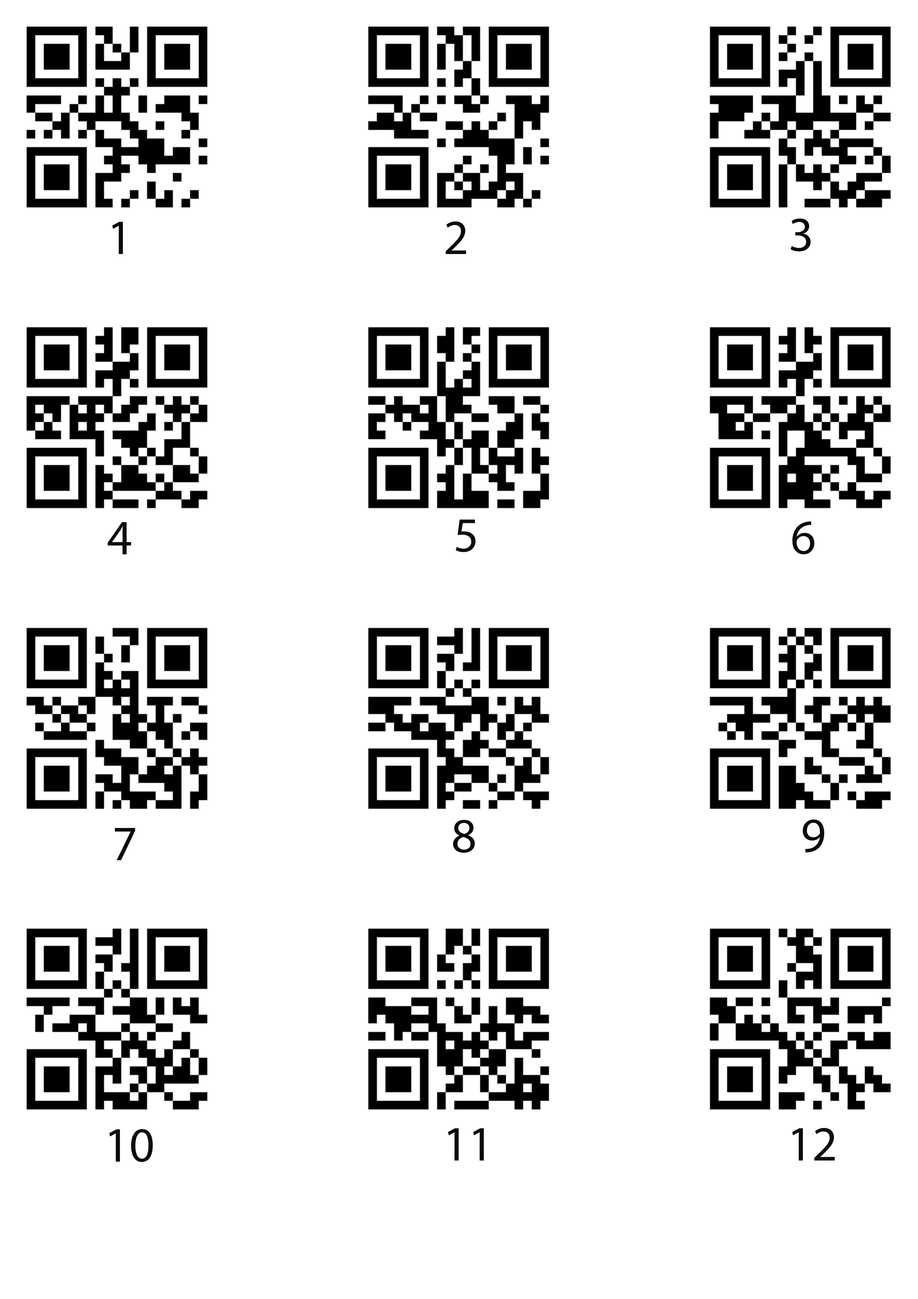
<style>
.page{position:relative;width:918px;height:1299px;background:#ffffff}
.page>*{position:absolute;margin:0}
.t1{font:49.4px "MyriadPro-Regular";color:#0a0c0b}
</style>
<div class="page">
<p class="t1" style="left:112px;top:222px;width:11px;height:32px">1</p>
<p class="t1" style="left:445px;top:221px;width:21px;height:33px">2</p>
<p class="t1" style="left:790px;top:218px;width:21px;height:34px">3</p>
<p class="t1" style="left:456px;top:519px;width:20px;height:33px">5</p>
<p class="t1" style="left:792px;top:521px;width:22px;height:33px">6</p>
<p class="t1" style="left:108px;top:522px;width:23px;height:32px">4</p>
<p class="t1" style="left:453px;top:819px;width:22px;height:34px">8</p>
<p class="t1" style="left:803px;top:819px;width:21px;height:34px">9</p>
<p class="t1" style="left:115px;top:828px;width:20px;height:32px">7</p>
<p class="t1" style="left:109px;top:1129px;width:44px;height:33px">10</p>
<p class="t1" style="left:448px;top:1128px;width:36px;height:32px">11</p>
<p class="t1" style="left:792px;top:1128px;width:43px;height:32px">12</p>
</div>
